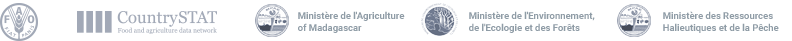
<style>
.page{position:relative;width:792px;height:41px;background:#ffffff}
.page>*{position:absolute;margin:0}
.t1{font:9.6px "Roboto-Bold";color:#8f9ca6}
</style>
<div class="page">
<p class="t1" style="left:298px;top:11px;width:107px;height:22px">Ministère de l'Agriculture<br>of Madagascar</p>
<p class="t1" style="left:469px;top:11px;width:126px;height:22px">Ministère de l'Environnement, <br>de l'Ecologie et des Forêts</p>
<p class="t1" style="left:663px;top:11px;width:116px;height:22px">Ministère des Ressources <br>Halieutiques et de la Pêche</p>
</div>
